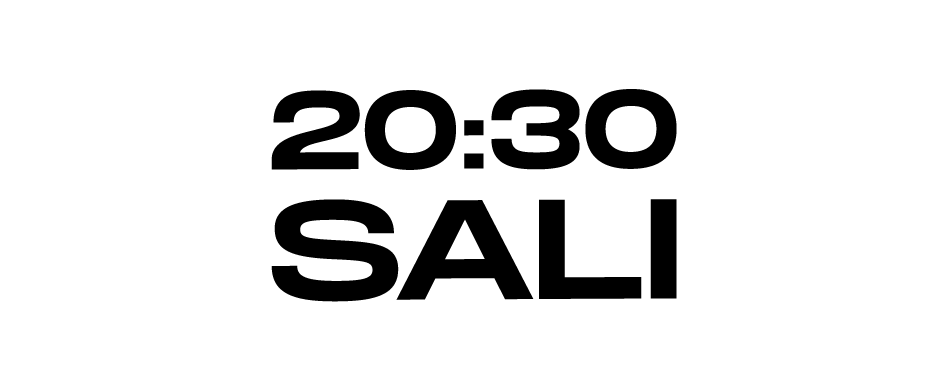
<style>
.page{position:relative;width:948px;height:392px;background:#ffffff}
.page>*{position:absolute;margin:0}
.t1{font:100.2px "MonumentExtended-Regular";color:#000000}
</style>
<div class="page">
<p class="t1" style="left:271px;top:89px;width:406px;height:213px;text-align:center">20:30<br>SALI</p>
</div>
